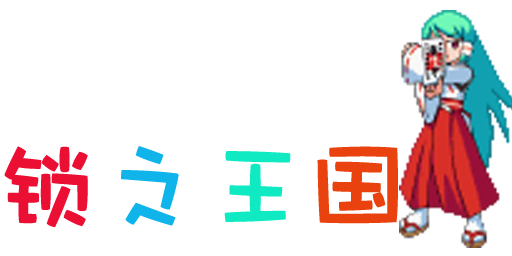
<style>
.page{position:relative;width:512px;height:256px;background:#ffffff}
.page>*{position:absolute;margin:0}
.t1{font:100px "DFWaWaSC-W5";color:#ea420f;font-weight:bold}
.t2{font:100px "DFWaWaSC-W5";color:#ea0f33;font-weight:bold}
.t3{font:100px "DFWaWaSC-W5";color:#0fb4ea;font-weight:bold}
.t4{font:100px "DFWaWaSC-W5";color:#0feac3;font-weight:bold}
</style>
<div class="page">
<p class="t1" style="left:4px;top:146px;width:394px;height:82px"><span class="t2">锁</span><span class="t3">之</span><span class="t4">王</span>国历险记</p>
</div>
